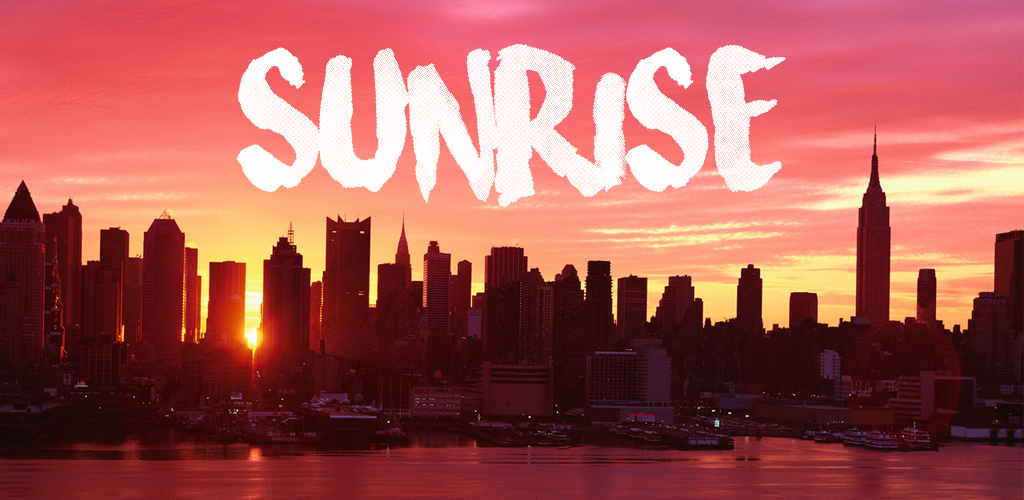
<style>
.page{position:relative;width:1024px;height:500px}
.page>*{position:absolute;margin:0}
.t1{font:150px "SurfingCapital";color:#ffffff}
</style>
<div class="page">
<p class="t1" style="left:236px;top:43px;width:550px;height:164px">Sunrise</p>
<p class="t1" style="left:236px;top:43px;width:550px;height:164px">Sunrise</p>
</div>
